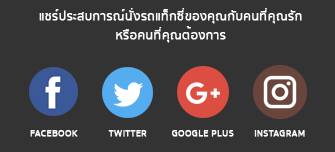
<style>
.page{position:relative;width:335px;height:152px;background:#333333}
.page>*{position:absolute;margin:0}
.t1{font:11.1px/19px "SukhumvitSet-Medium";color:#ffffff;font-weight:bold}
.t2{font:8.5px "SukhumvitSet-Medium";color:#ffffff;font-weight:bold}
</style>
<div class="page">
<p class="t1" style="left:39px;top:8px;width:263px;height:35px;text-align:center">แชร์ประสบการณ์นั่งรถแท็กซี่ของคุณกับคนที่คุณรัก หรือคนที่คุณต้องการ</p>
<p class="t2" style="left:30px;top:130px;width:48px;height:7px">FACEBOOK</p>
<p class="t2" style="left:108px;top:130px;width:39px;height:7px">TWITTER</p>
<p class="t2" style="left:172px;top:130px;width:62px;height:7px">GOOGLE PLUS</p>
<p class="t2" style="left:254px;top:130px;width:51px;height:7px">INSTAGRAM</p>
</div>
